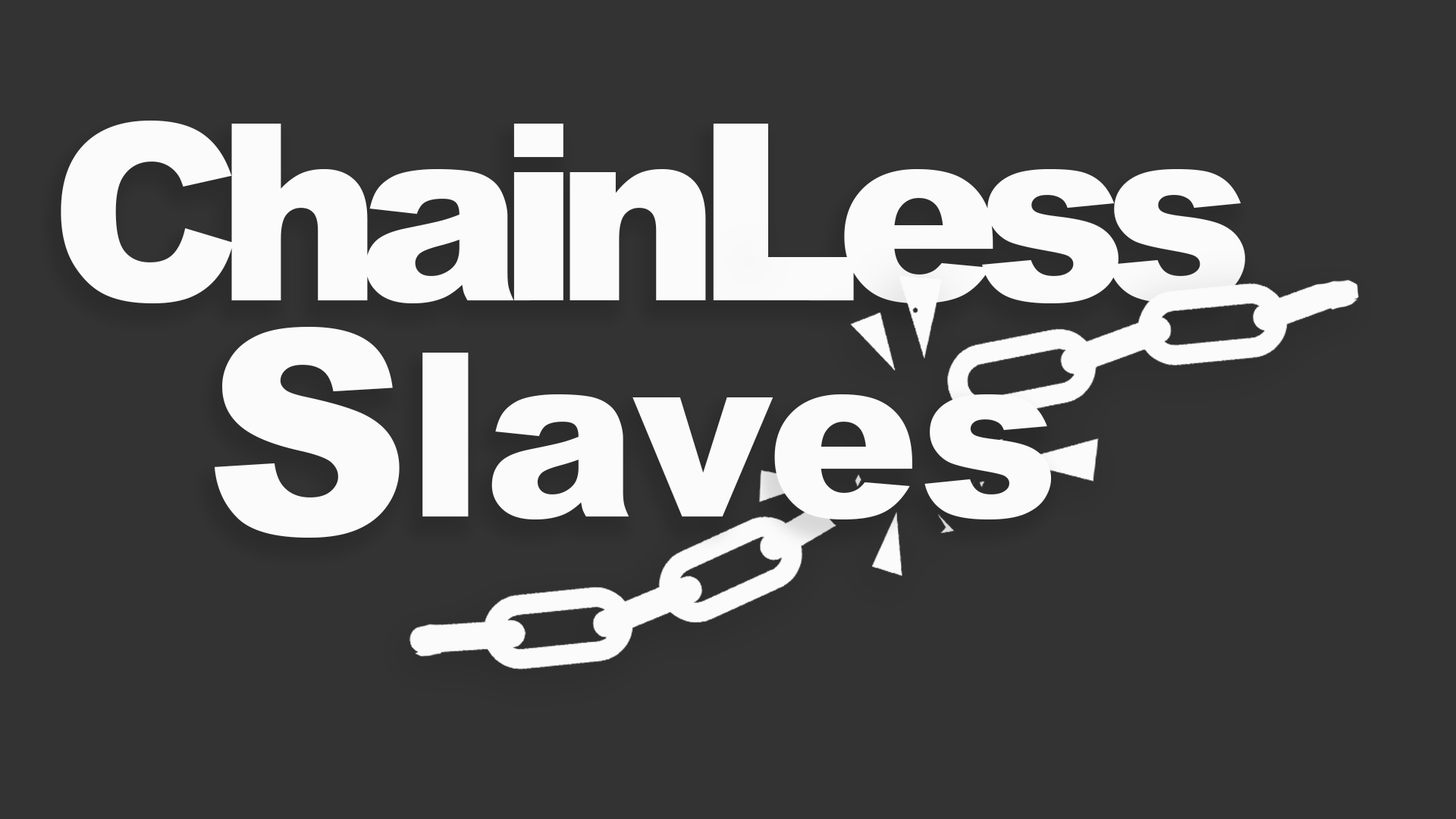
<style>
.page{position:relative;width:1456px;height:819px;background:#333333}
.page>*{position:absolute;margin:0}
.t1{font:247.5px "Arial-Black";letter-spacing:-0.1em;color:#fcfbfb}
.t2{font:201.6px "Arial-Black";color:#030303}
.t3{font:284.1px "Arial-Black";color:#fcfbfb}
.t4{font:229.1px "Arial-Black";color:#fcfbfb}
</style>
<div class="page">
<p class="t1" style="left:61px;top:121px;width:1184px;height:182px"><span class="t2"><br></span>ChainLess</p>
<p class="t3" style="left:215px;top:327px;width:185px;height:211px"><span class="t2">           </span>S</p>
<p class="t4" style="left:422px;top:353px;width:629px;height:166px">laves</p>
</div>
